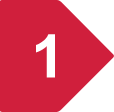
<style>
.page{position:relative;width:114px;height:112px;background:#d01f3c}
.page>*{position:absolute;margin:0}
.t1{font:60px "Arial-BoldMT";letter-spacing:-0.05em;color:#ffffff}
</style>
<div class="page">
<p class="t1" style="left:36px;top:34px;width:19px;height:44px">1</p>
</div>
